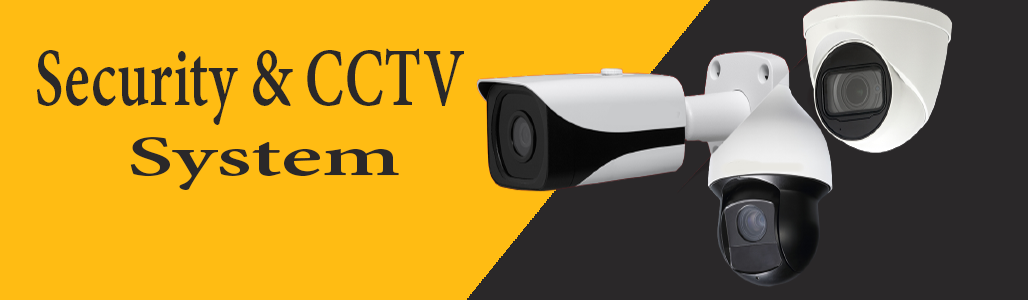
<style>
.page{position:relative;width:1028px;height:300px;background:#ffbc13}
.page>*{position:absolute;margin:0}
.t1{font:90px "AdobeDevanagari-Bold";color:#2a2829;scale:0.72 1}
.t2{font:61.4px "AdobeDevanagari-Bold";color:#2a2829;scale:1.67 1}
</style>
<div class="page">
<p class="t1" style="left:37px;top:48px;width:427px;height:77px">Security &amp; CCTV</p>
<p class="t2" style="left:130px;top:137px;width:269px;height:53px">System</p>
</div>
